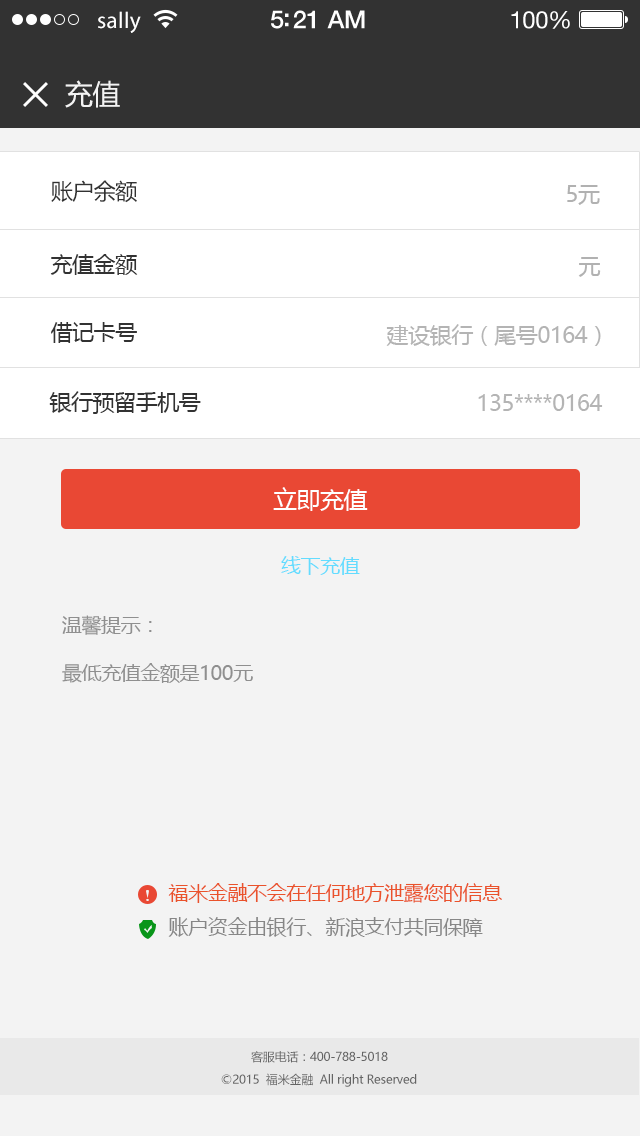
<style>
.page{position:relative;width:640px;height:1136px;background:#f3f3f3}
.page>*{position:absolute;margin:0}
.t1{font:23px "MyriadPro-Regular";letter-spacing:0.02em;color:#ffffff}
.t2{font:25px "HelveticaNeue-Medium";letter-spacing:-0.02em;color:#ffffff}
.t3{font:24px "HelveticaNeue";letter-spacing:-0.02em;color:#ffffff}
.t4{font:28px "MicrosoftYaHei";letter-spacing:-0.02em;color:#f3f3f3}
.t5{font:22px "MicrosoftYaHei";letter-spacing:-0.02em;color:#323232}
.t6{font:22px "MicrosoftYaHei";letter-spacing:-0.02em;color:#b1b1b1}
.t7{font:22px "MicrosoftYaHei";letter-spacing:-0.02em;color:#b4b4b4}
.t8{font:24px "MicrosoftYaHei";letter-spacing:-0.02em;color:#ffffff}
.t9{font:20px "MicrosoftYaHei";letter-spacing:-0.02em;color:#63dcff}
.t10{font:20px "MicrosoftYaHei";letter-spacing:-0.02em;color:#8f8f8f}
.t11{font:20px "MicrosoftYaHei";letter-spacing:-0.02em;color:#ea522b}
.t12{font:20px "MicrosoftYaHei";letter-spacing:-0.02em;color:#878787}
.t13{font:12px "MicrosoftYaHei";letter-spacing:-0.02em;color:#646464}
</style>
<div class="page">
<p class="t1" style="left:98px;top:11px;width:43px;height:22px">sally</p>
<p class="t2" style="left:271px;top:10px;width:94px;height:19px">5:21 AM</p>
<p class="t3" style="left:511px;top:11px;width:59px;height:18px">100%</p>
<p class="t4" style="left:65px;top:80px;width:55px;height:28px">充值</p>
<p class="t5" style="left:51px;top:180px;width:86px;height:23px">账户余额</p>
<p class="t6" style="left:567px;top:185px;width:33px;height:20px">5元</p>
<p class="t5" style="left:50px;top:254px;width:88px;height:21px">充值金额</p>
<p class="t6" style="left:578px;top:257px;width:23px;height:20px">元</p>
<p class="t5" style="left:51px;top:322px;width:86px;height:21px">借记卡号</p>
<p class="t7" style="left:386px;top:324px;width:215px;height:22px">建设银行（尾号0164）</p>
<p class="t5" style="left:49px;top:391px;width:152px;height:23px">银行预留手机号</p>
<p class="t7" style="left:478px;top:394px;width:125px;height:17px">135****0164</p>
<p class="t8" style="left:273px;top:487px;width:95px;height:24px">立即充值</p>
<p class="t9" style="left:281px;top:556px;width:79px;height:19px">线下充值</p>
<p class="t10" style="left:62px;top:615px;width:90px;height:20px">温馨提示：</p>
<p class="t10" style="left:62px;top:663px;width:191px;height:20px">最低充值金额是100元</p>
<p class="t11" style="left:168px;top:883px;width:334px;height:20px">福米金融不会在任何地方泄露您的信息</p>
<p class="t12" style="left:168px;top:917px;width:315px;height:20px">账户资金由银行、新浪支付共同保障</p>
<p class="t13" style="left:251px;top:1051px;width:137px;height:12px">客服电话：400-788-5018</p>
<p class="t13" style="left:221px;top:1073px;width:196px;height:14px">©2015  福米金融  All right Reserved</p>
</div>
